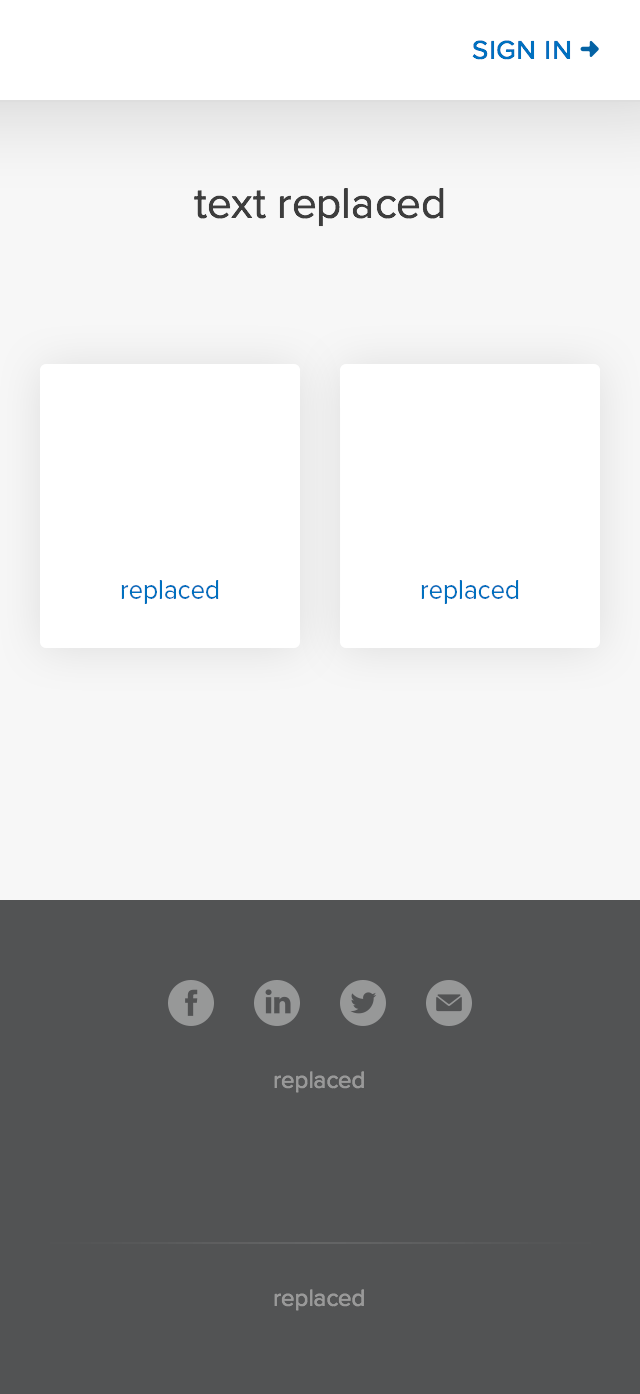
<style>
.page{position:relative;width:640px;height:1394px;background:#525354}
.page>*{position:absolute;margin:0}
.t1{font:32px "ProximaNova-Regular";color:#0070bf;font-variant:small-caps}
.t2{font:44px "ProximaNova-Regular";color:#3d3d3d}
.t3{font:28px "ProximaNova-Regular";color:#0070bf;scale:0.93 1}
.t4{font:24px "ProximaNova-Regular";color:#999999}
</style>
<div class="page">
<p class="t1" style="left:472px;top:40px;width:99px;height:20px">sign in</p>
<p class="t2" style="left:194px;top:188px;width:250px;height:39px">text replaced</p>
<p class="t3" style="left:121px;top:580px;width:98px;height:24px">replaced</p>
<p class="t3" style="left:421px;top:580px;width:98px;height:24px">replaced</p>
<p class="t4" style="left:274px;top:1071px;width:90px;height:22px">replaced</p>
<p class="t4" style="left:274px;top:1289px;width:90px;height:22px">replaced</p>
</div>
